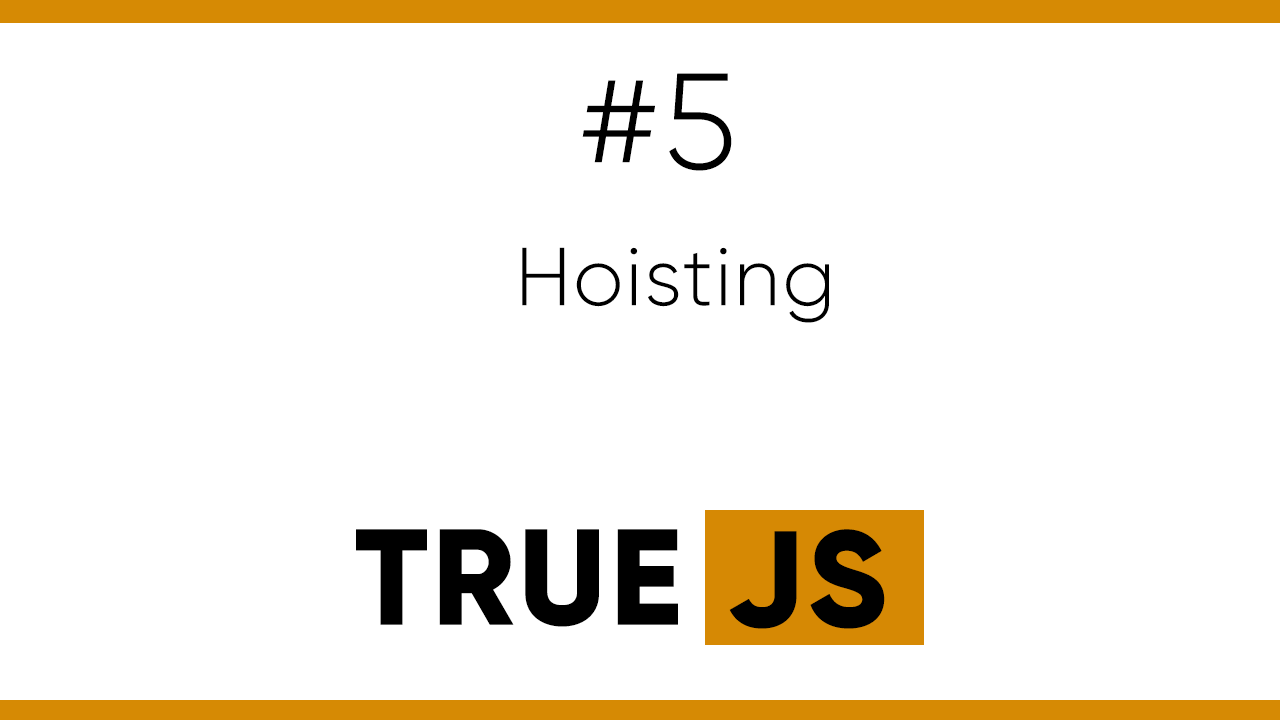
<style>
.page{position:relative;width:1280px;height:720px;background:#ffffff}
.page>*{position:absolute;margin:0}
.t1{font:136px "Gilroy-Light";letter-spacing:0.025em;color:#000000}
.t2{font:82px "Gilroy-Light";letter-spacing:0.025em;color:#000000}
.t3{font:136px "Gilroy-ExtraBold";letter-spacing:0.025em;color:#000000}
</style>
<div class="page">
<p class="t1" style="left:582px;top:73px;width:150px;height:98px">#5</p>
<p class="t2" style="left:522px;top:247px;width:307px;height:76px">Hoisting</p>
<p class="t3" style="left:356px;top:529px;width:322px;height:98px">TRUE</p>
<p class="t3" style="left:729px;top:529px;width:156px;height:100px">JS</p>
</div>
